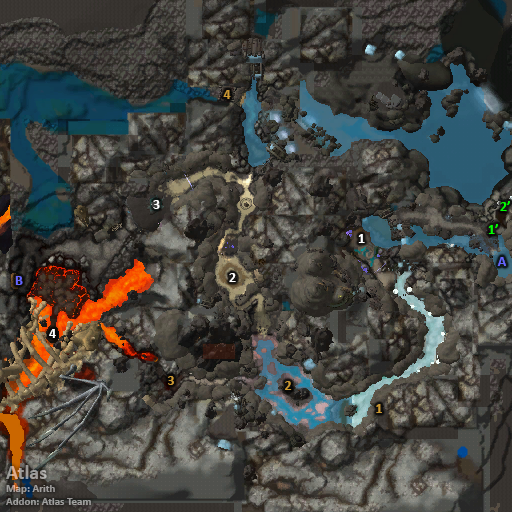
<style>
.page{position:relative;width:512px;height:512px}
.page>*{position:absolute;margin:0}
.t1{font:14px "Calibri-Bold";color:#cc9933}
.t2{font:14px "Calibri-Bold";color:#ffffff}
.t3{font:14px "Calibri-Bold";color:#00ff00}
.t4{font:14px "Calibri-Bold";color:#6666ff}
.t5{font:11px "Calibri-Bold";color:#9e9d9a}
.t6{font:20px "Calibri-Bold";color:#9e9d9a}
</style>
<div class="page">
<p class="t1" style="left:223px;top:90px;width:8px;height:9px">4</p>
<p class="t2" style="left:153px;top:200px;width:7px;height:9px">3</p>
<p class="t3" style="left:500px;top:201px;width:10px;height:10px">2’</p>
<p class="t3" style="left:488px;top:224px;width:10px;height:10px">1’</p>
<p class="t2" style="left:358px;top:234px;width:7px;height:9px">1</p>
<p class="t4" style="left:497px;top:257px;width:9px;height:9px">A</p>
<p class="t4" style="left:15px;top:276px;width:8px;height:9px">B</p>
<p class="t2" style="left:229px;top:273px;width:7px;height:9px">2</p>
<p class="t2" style="left:49px;top:329px;width:7px;height:9px">4</p>
<p class="t1" style="left:168px;top:376px;width:6px;height:9px">3</p>
<p class="t1" style="left:285px;top:381px;width:7px;height:9px">2</p>
<p class="t1" style="left:376px;top:404px;width:6px;height:9px">1</p>
<p class="t5" style="left:6px;top:465px;width:85px;height:40px"><span class="t6">Atlas<br></span>Map: Arith<br>Addon: Atlas Team</p>
</div>
